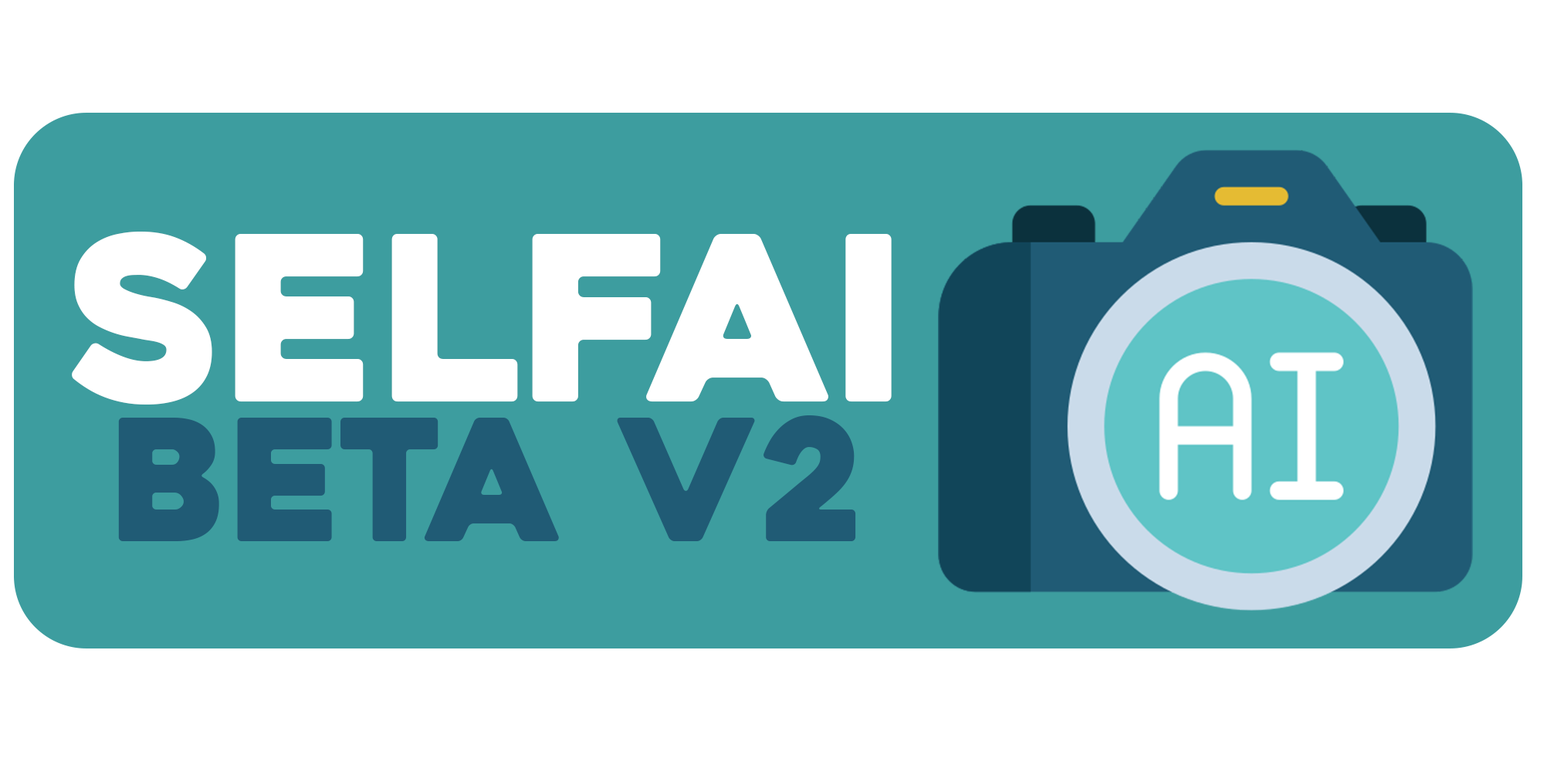
<style>
.page{position:relative;width:1544px;height:772px;background:#ffffff}
.page>*{position:absolute;margin:0}
.t1{font:229.1px "Heavitas";color:#ffffff}
.t2{font:168.8px "Heavitas";color:#205b75}
</style>
<div class="page">
<p class="t1" style="left:72px;top:232px;width:820px;height:173px">SELFAI</p>
<p class="t2" style="left:118px;top:415px;width:738px;height:126px">BETA V2</p>
</div>
